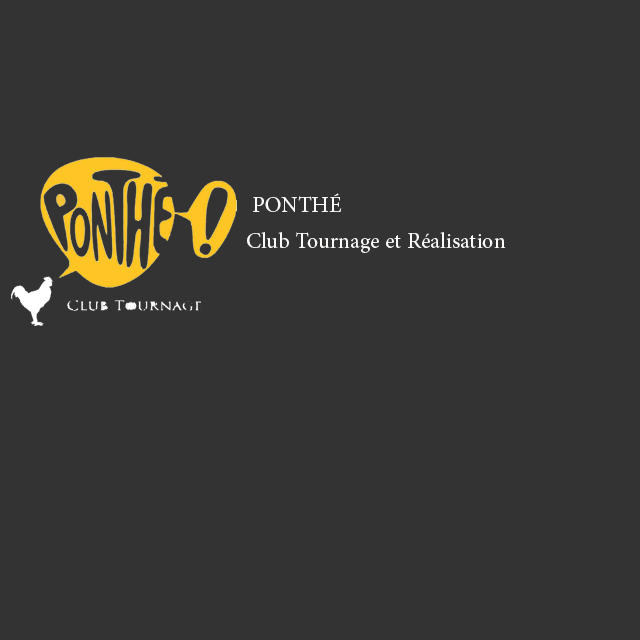
<style>
.page{position:relative;width:640px;height:640px;background:#333333}
.page>*{position:absolute;margin:0}
.t1{font:30px "AdobeArabic-Regular";color:#fcfbfa}
</style>
<div class="page">
<p class="t1" style="left:247px;top:193px;width:259px;height:60px;text-align:right">PONTHÉ <br>Club Tournage et Réalisation</p>
</div>
